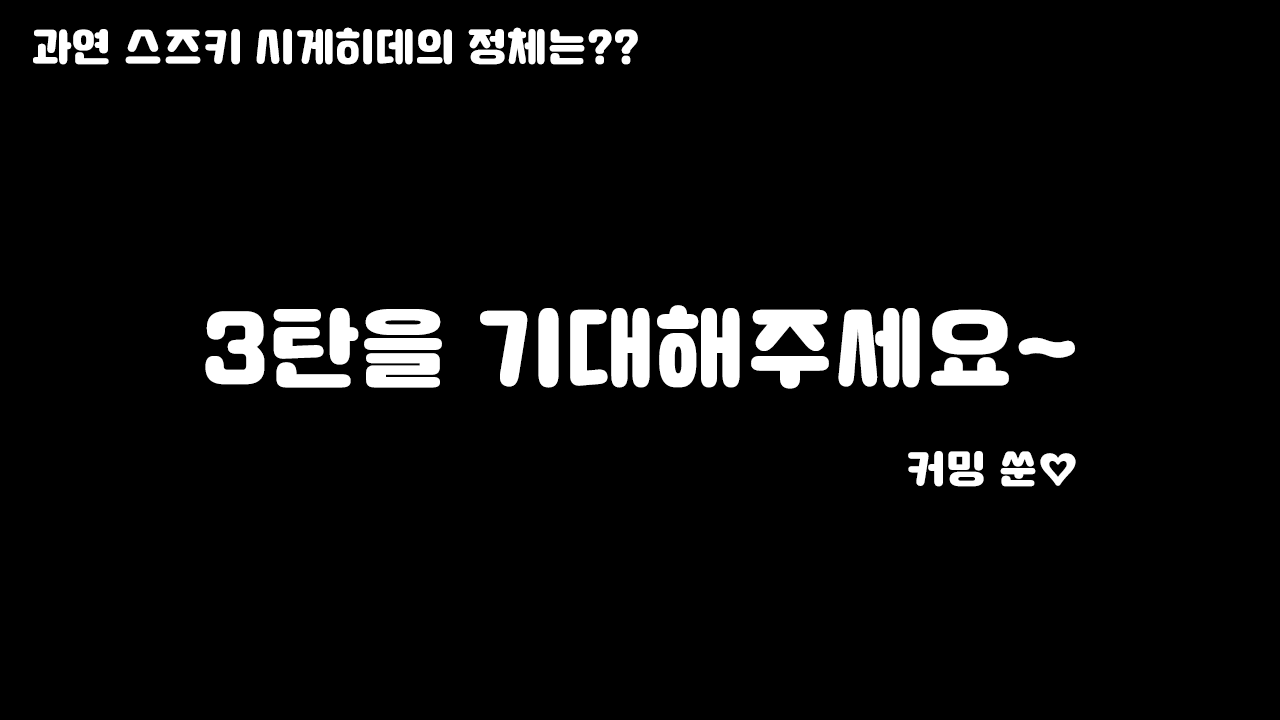
<style>
.page{position:relative;width:1280px;height:720px;background:#000000}
.page>*{position:absolute;margin:0}
.t1{font:40px "TypoDabangguB";color:#ffffff}
.t2{font:90px "TypoDabangguB";color:#ffffff}
</style>
<div class="page">
<p class="t1" style="left:33px;top:27px;width:605px;height:38px">과연 스즈키 시게히데의 정체는??</p>
<p class="t2" style="left:205px;top:305px;width:870px;height:84px">3탄을 기대해주세요~</p>
<p class="t1" style="left:908px;top:451px;width:168px;height:36px">커밍 쑨♡</p>
</div>
